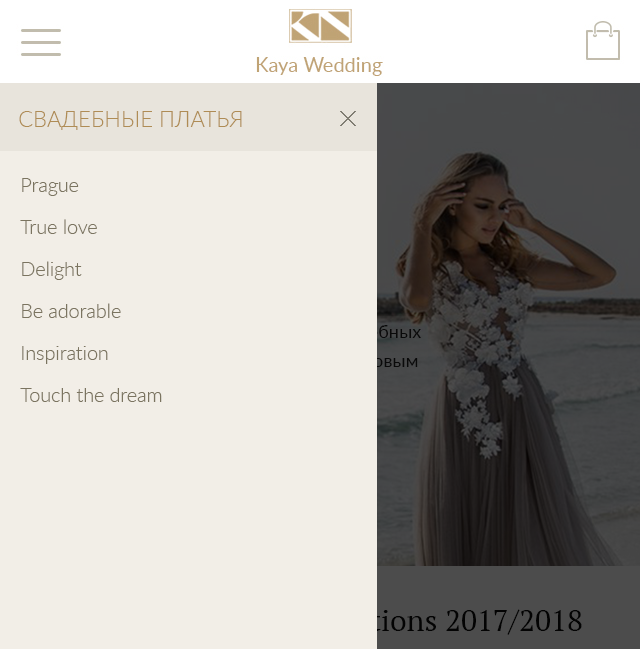
<style>
.page{position:relative;width:640px;height:649px;background:#f2eee7}
.page>*{position:absolute;margin:0}
.t1{font:22px "Lato-Light";color:#af8c55;text-transform:uppercase}
.t2{font:20px/42px "Lato-Light";color:#7b7460}
</style>
<div class="page">
<p class="t1" style="left:19px;top:111px;width:223px;height:19px">Свадебные платья</p>
<p class="t2" style="left:20px;top:178px;width:142px;height:224px">Prague<br>True love<br>Delight<br>Be adorable<br>Inspiration<br>Touch the dream</p>
</div>
